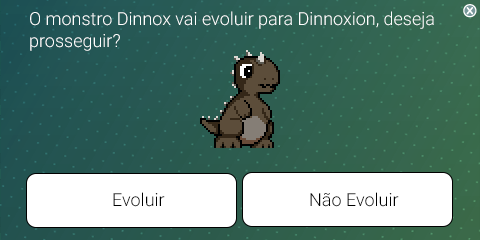
<style>
.page{position:relative;width:480px;height:240px}
.page>*{position:absolute;margin:0}
.t1{font:18px "Roboto-Light";color:#ffffff}
.t2{font:18px "Roboto-Light";color:#000000}
</style>
<div class="page">
<p class="t1" style="left:30px;top:11px;width:404px;height:40px">O monstro Dinnox vai evoluir para Dinnoxion, deseja<br>prosseguir?</p>
<p class="t2" style="left:113px;top:192px;width:52px;height:15px">Evoluir</p>
<p class="t2" style="left:310px;top:192px;width:89px;height:15px">Não Evoluir</p>
</div>
